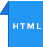
<style>
.page{position:relative;width:43px;height:47px;background:#2196f3}
.page>*{position:absolute;margin:0}
.t1{font:8px "Montserrat-Regular";letter-spacing:0.2em;color:#ffffff}
</style>
<div class="page">
<p class="t1" style="left:13px;top:23px;width:28px;height:6px">HTML</p>
</div>
